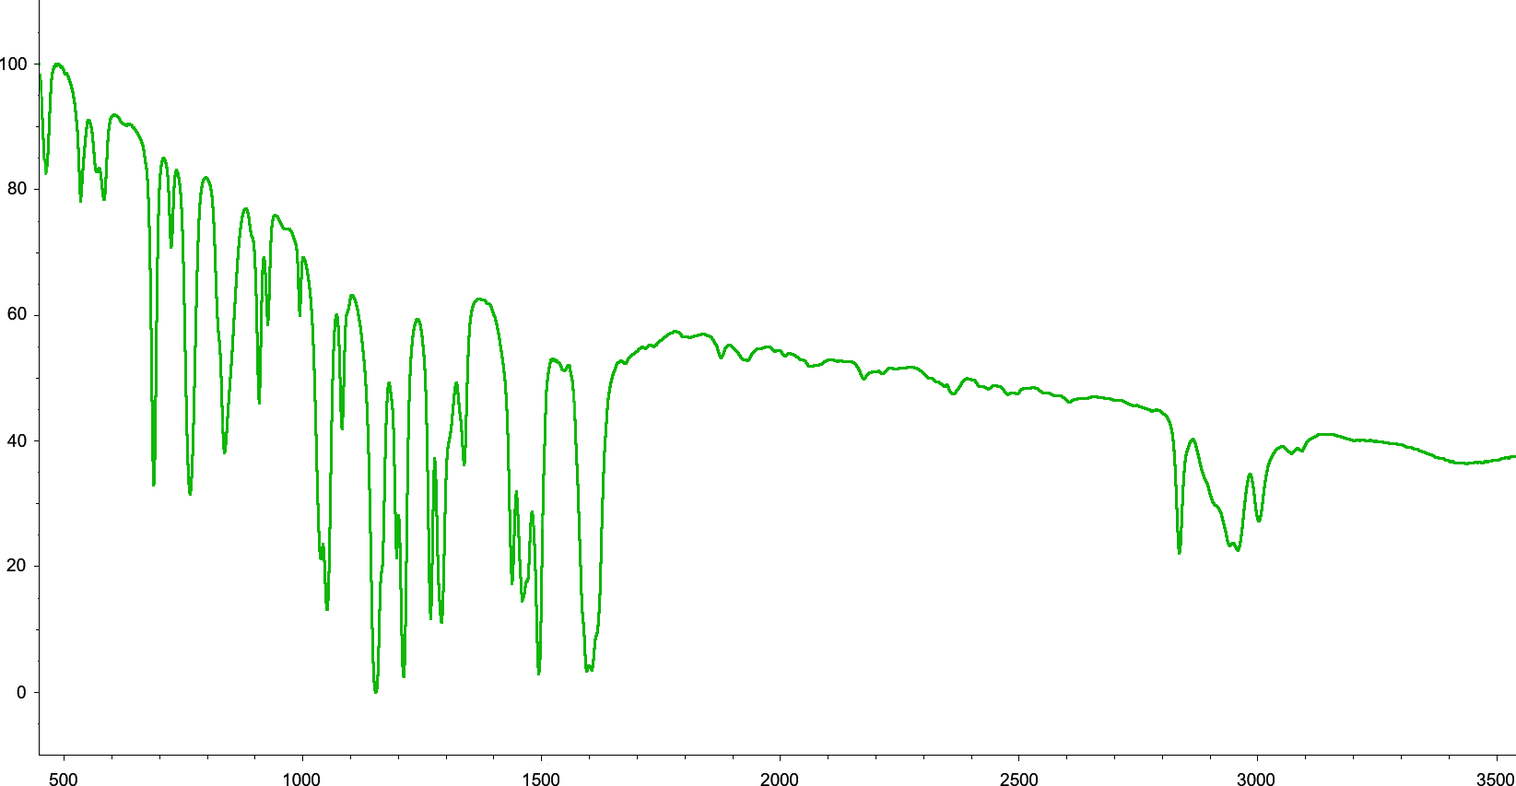
<style>
.page{position:relative;width:1516px;height:786px;background:#ffffff}
.page>*{position:absolute;margin:0}
.t1{font:17.2px "ArialMT";color:#000000}
</style>
<div class="page">
<p class="t1" style="left:0px;top:57px;width:27px;height:13px">100</p>
<p class="t1" style="left:7px;top:182px;width:20px;height:13px">80</p>
<p class="t1" style="left:7px;top:307px;width:20px;height:13px">60</p>
<p class="t1" style="left:7px;top:434px;width:20px;height:13px">40</p>
<p class="t1" style="left:6px;top:559px;width:20px;height:13px">20</p>
<p class="t1" style="left:17px;top:686px;width:9px;height:13px">0</p>
<p class="t1" style="left:49px;top:773px;width:28px;height:13px">500</p>
<p class="t1" style="left:284px;top:773px;width:36px;height:13px">1000</p>
<p class="t1" style="left:524px;top:773px;width:36px;height:13px">1500</p>
<p class="t1" style="left:761px;top:773px;width:37px;height:13px">2000</p>
<p class="t1" style="left:1000px;top:773px;width:38px;height:13px">2500</p>
<p class="t1" style="left:1237px;top:773px;width:38px;height:13px">3000</p>
<p class="t1" style="left:1477px;top:773px;width:38px;height:13px">3500</p>
</div>
